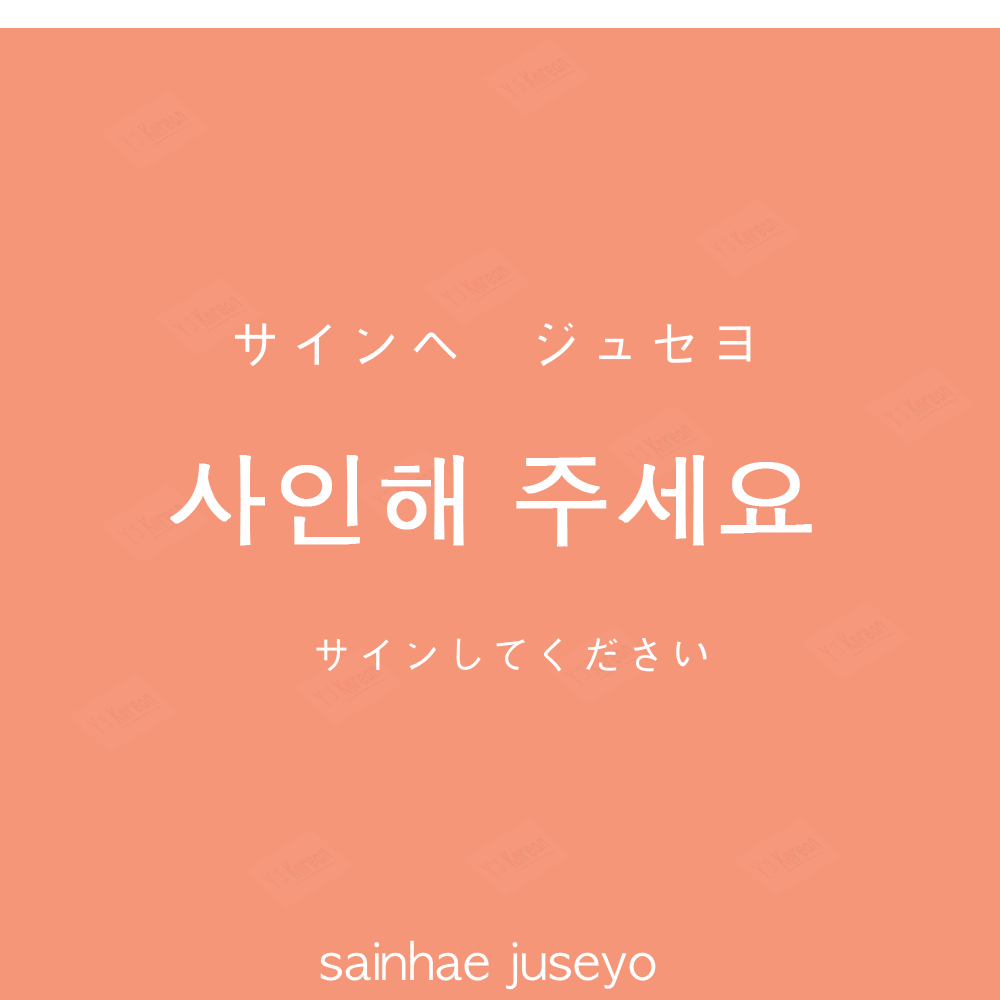
<style>
.page{position:relative;width:1000px;height:1000px;background:#f69679}
.page>*{position:absolute;margin:0}
.t1{font:60px "AppleGothic";color:#ffffff}
.t2{font:100px "AppleGothic";color:#ffffff;font-weight:bold}
.t3{font:45px "AppleGothic";color:#ffffff}
.t4{font:50px "AppleGothic";color:#ffffff}
</style>
<div class="page">
<p class="t1" style="left:234px;top:322px;width:517px;height:45px">サインヘ　ジュセヨ</p>
<p class="t2" style="left:170px;top:455px;width:642px;height:92px">사인해 주세요</p>
<p class="t3" style="left:316px;top:638px;width:391px;height:34px">サインしてください</p>
<p class="t4" style="left:320px;top:940px;width:336px;height:50px">sainhae juseyo</p>
</div>
